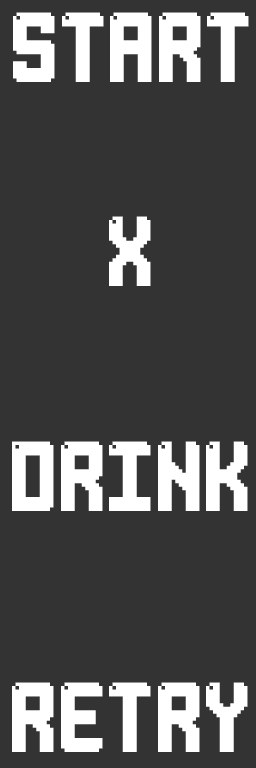
<style>
.page{position:relative;width:256px;height:768px;background:#333333}
.page>*{position:absolute;margin:0}
.t1{font:69.5px "LightPixel-7";color:#ffffff}
</style>
<div class="page">
<p class="t1" style="left:13px;top:12px;width:236px;height:70px">START</p>
<p class="t1" style="left:109px;top:216px;width:42px;height:70px">X</p>
<p class="t1" style="left:12px;top:441px;width:236px;height:70px">DRINK</p>
<p class="t1" style="left:12px;top:682px;width:236px;height:70px">RETRY</p>
</div>
